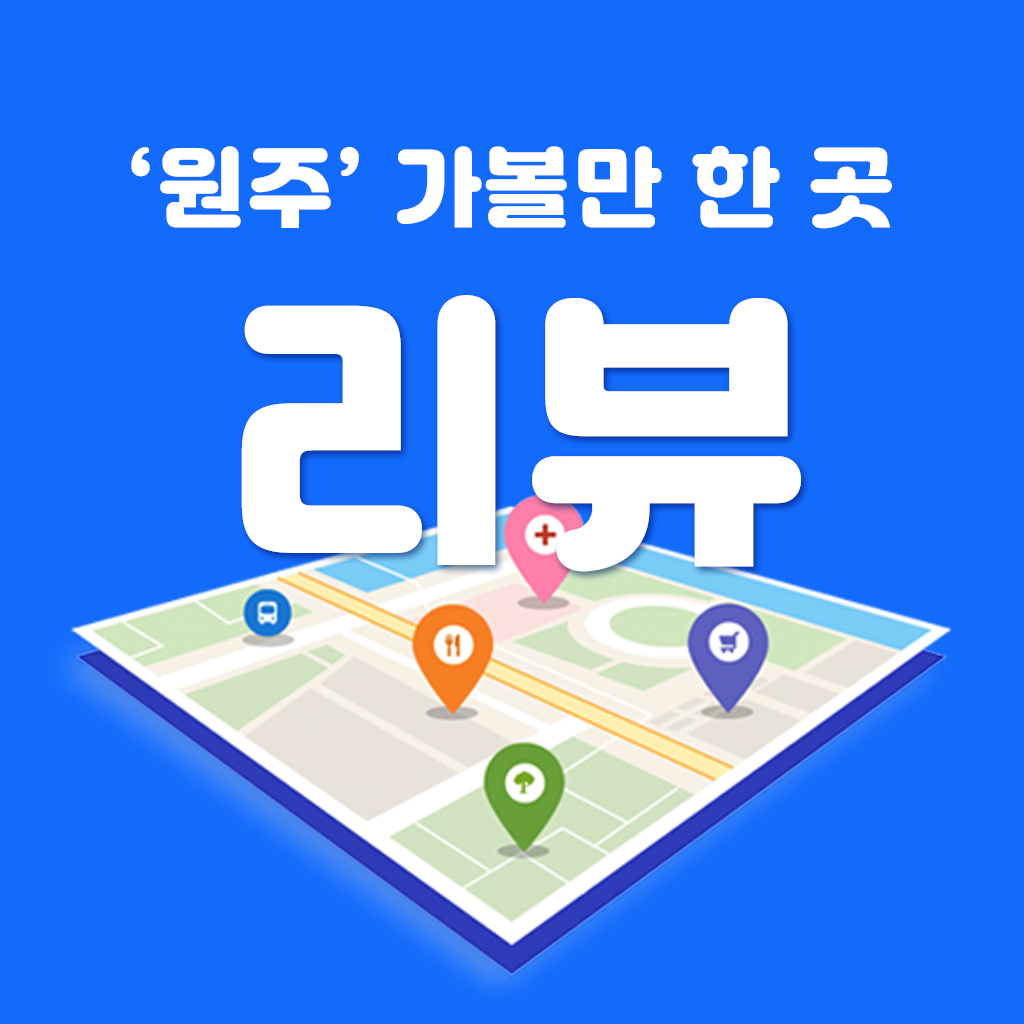
<style>
.page{position:relative;width:1024px;height:1024px;background:#136bfb}
.page>*{position:absolute;margin:0}
.t1{font:86.6px "ygotjalnanfontOTF";letter-spacing:0.04em;color:#ffffff}
.t2{font:287.2px "ygotjalnanfontOTF";letter-spacing:0.04em;color:#ffffff}
</style>
<div class="page">
<p class="t1" style="left:131px;top:145px;width:761px;height:84px">‘원주’ 가볼만 한 곳</p>
<p class="t2" style="left:241px;top:295px;width:560px;height:277px">리뷰</p>
</div>
